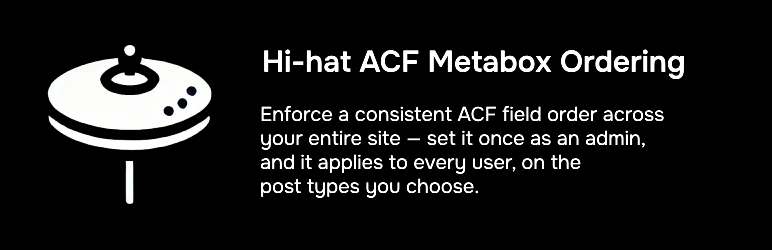
<style>
.page{position:relative;width:772px;height:250px;background:#000000}
.page>*{position:absolute;margin:0}
.t1{font:30px "Onest-SemiBold";color:#ffffff}
.t2{font:20px "Onest-Regular";color:#ffffff}
</style>
<div class="page">
<p class="t1" style="left:264px;top:49px;width:420px;height:31px">Hi-hat ACF Metabox Ordering</p>
<p class="t2" style="left:260px;top:105px;width:404px;height:93px">Enforce a consistent ACF field order across <br>your entire site — set it once as an admin, <br>and it applies to every user, on the <br>post types you choose.</p>
</div>
